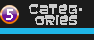
<style>
.page{position:relative;width:94px;height:40px;background:#1b1b1b}
.page>*{position:absolute;margin:0}
.t1{font:12px/11px "Baveuse";color:#cccccc}
</style>
<div class="page">
<p class="t1" style="left:29px;top:4px;width:53px;height:21px;text-align:center">categ-<br>ories</p>
</div>
